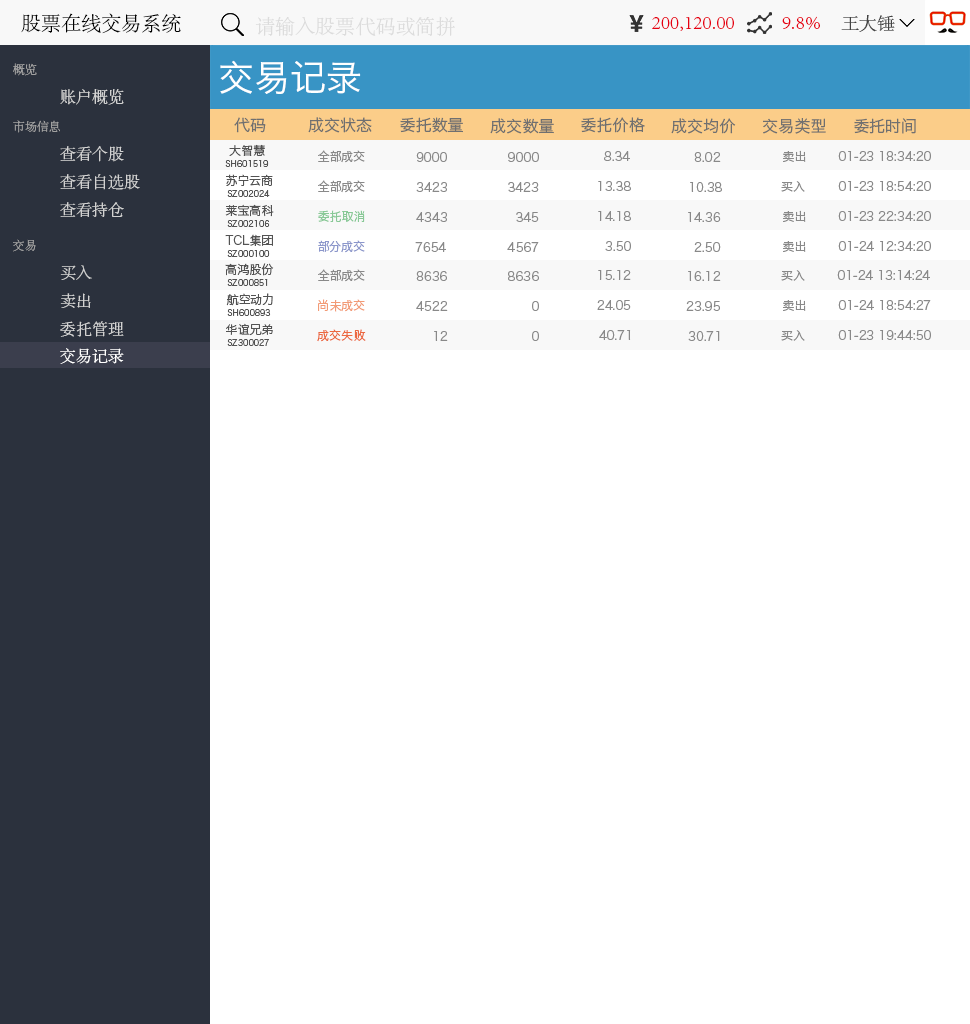
<style>
.page{position:relative;width:970px;height:1024px;background:#ffffff}
.page>*{position:absolute;margin:0}
.t1{font:20px "AdobeSongStd-Light";color:#000000}
.t2{font:20px "AdobeSongStd-Light";color:#dcdcdc}
.t3{font:20px "AdobeSongStd-Light";color:#e60012}
.t4{font:18px "AdobeSongStd-Light";color:#434343}
.t5{font:12px "AdobeSongStd-Light";color:#a0a0a0}
.t6{font:36px "HiraginoSansGB-W3";color:#ffffff}
.t7{font:16px "AdobeSongStd-Light";color:#d2d2d2}
.t8{font:16px "HiraginoSansGB-W3";color:#707070}
.t9{font:12px "HiraginoSansGB-W3";color:#535353}
.t10{font:12px "HiraginoSansGB-W3";color:#898989}
.t11{font:8px "HiraginoSansGB-W3";color:#535353}
.t12{font:12px "HiraginoSansGB-W3";color:#89c997}
.t13{font:12px "HiraginoSansGB-W3";color:#8c97cb}
.t14{font:12px "HiraginoSansGB-W3";color:#f29b76}
.t15{font:12px "HiraginoSansGB-W3";color:#ec6941}
.t16{font:16px "AdobeSongStd-Light";color:#ffffff}
</style>
<div class="page">
<p class="t1" style="left:21px;top:13px;width:160px;height:21px">股票在线交易系统</p>
<p class="t2" style="left:255px;top:16px;width:200px;height:21px">请输入股票代码或简拼</p>
<p class="t3" style="left:652px;top:17px;width:82px;height:14px">200,120.00</p>
<p class="t3" style="left:782px;top:16px;width:38px;height:14px">9.8%</p>
<p class="t4" style="left:841px;top:15px;width:54px;height:17px">王大锤</p>
<p class="t5" style="left:13px;top:63px;width:24px;height:13px">概览</p>
<p class="t6" style="left:220px;top:60px;width:141px;height:34px">交易记录</p>
<p class="t7" style="left:60px;top:89px;width:64px;height:16px">账户概览</p>
<p class="t5" style="left:13px;top:120px;width:47px;height:13px">市场信息</p>
<p class="t8" style="left:234px;top:117px;width:32px;height:16px">代码</p>
<p class="t8" style="left:308px;top:117px;width:64px;height:16px">成交状态</p>
<p class="t8" style="left:400px;top:117px;width:63px;height:16px">委托数量</p>
<p class="t8" style="left:490px;top:118px;width:64px;height:16px">成交数量</p>
<p class="t8" style="left:581px;top:117px;width:64px;height:16px">委托价格</p>
<p class="t8" style="left:671px;top:118px;width:65px;height:16px">成交均价</p>
<p class="t8" style="left:763px;top:118px;width:63px;height:16px">交易类型</p>
<p class="t8" style="left:854px;top:118px;width:62px;height:16px">委托时间</p>
<p class="t7" style="left:60px;top:146px;width:64px;height:16px">查看个股</p>
<p class="t9" style="left:229px;top:144px;width:36px;height:12px">大智慧</p>
<p class="t10" style="left:318px;top:150px;width:47px;height:13px">全部成交</p>
<p class="t10" style="left:783px;top:150px;width:23px;height:12px">卖出</p>
<p class="t11" style="left:225px;top:160px;width:44px;height:7px">SH601519</p>
<p class="t10" style="left:416px;top:152px;width:31px;height:10px">9000</p>
<p class="t10" style="left:508px;top:152px;width:31px;height:10px">9000</p>
<p class="t10" style="left:604px;top:151px;width:26px;height:10px">8.34</p>
<p class="t10" style="left:694px;top:152px;width:27px;height:10px">8.02</p>
<p class="t10" style="left:838px;top:151px;width:93px;height:10px">01-23 18:34:20</p>
<p class="t7" style="left:60px;top:174px;width:80px;height:16px">查看自选股</p>
<p class="t9" style="left:226px;top:174px;width:47px;height:12px">苏宁云商</p>
<p class="t10" style="left:318px;top:180px;width:47px;height:13px">全部成交</p>
<p class="t10" style="left:416px;top:182px;width:31px;height:10px">3423</p>
<p class="t10" style="left:508px;top:182px;width:31px;height:10px">3423</p>
<p class="t10" style="left:598px;top:181px;width:33px;height:10px">13.38</p>
<p class="t10" style="left:690px;top:182px;width:32px;height:10px">10.38</p>
<p class="t10" style="left:781px;top:181px;width:24px;height:11px">买入</p>
<p class="t10" style="left:838px;top:181px;width:93px;height:10px">01-23 18:54:20</p>
<p class="t11" style="left:227px;top:190px;width:43px;height:7px">SZ002024</p>
<p class="t7" style="left:60px;top:202px;width:64px;height:15px">查看持仓</p>
<p class="t9" style="left:225px;top:204px;width:49px;height:13px">莱宝高科</p>
<p class="t11" style="left:227px;top:220px;width:43px;height:7px">SZ002106</p>
<p class="t12" style="left:318px;top:210px;width:47px;height:12px">委托取消</p>
<p class="t10" style="left:416px;top:212px;width:31px;height:10px">4343</p>
<p class="t10" style="left:516px;top:212px;width:23px;height:10px">345</p>
<p class="t10" style="left:598px;top:211px;width:33px;height:10px">14.18</p>
<p class="t10" style="left:688px;top:212px;width:33px;height:10px">14.36</p>
<p class="t10" style="left:783px;top:210px;width:23px;height:12px">卖出</p>
<p class="t10" style="left:838px;top:211px;width:93px;height:10px">01-23 22:34:20</p>
<p class="t5" style="left:13px;top:239px;width:23px;height:13px">交易</p>
<p class="t9" style="left:225px;top:234px;width:48px;height:12px">TCL集团</p>
<p class="t13" style="left:318px;top:240px;width:47px;height:13px">部分成交</p>
<p class="t10" style="left:415px;top:242px;width:31px;height:10px">7654</p>
<p class="t10" style="left:507px;top:242px;width:32px;height:10px">4567</p>
<p class="t10" style="left:605px;top:241px;width:26px;height:10px">3.50</p>
<p class="t10" style="left:694px;top:242px;width:27px;height:10px">2.50</p>
<p class="t10" style="left:783px;top:240px;width:23px;height:12px">卖出</p>
<p class="t10" style="left:838px;top:241px;width:93px;height:10px">01-24 12:34:20</p>
<p class="t11" style="left:227px;top:250px;width:43px;height:7px">SZ000100</p>
<p class="t7" style="left:60px;top:265px;width:32px;height:15px">买入</p>
<p class="t9" style="left:225px;top:263px;width:49px;height:13px">高鸿股份</p>
<p class="t10" style="left:318px;top:269px;width:47px;height:13px">全部成交</p>
<p class="t10" style="left:598px;top:270px;width:33px;height:10px">15.12</p>
<p class="t10" style="left:781px;top:270px;width:24px;height:11px">买入</p>
<p class="t10" style="left:837px;top:270px;width:93px;height:10px">01-24 13:14:24</p>
<p class="t11" style="left:227px;top:279px;width:41px;height:7px">SZ000851</p>
<p class="t10" style="left:416px;top:271px;width:31px;height:10px">8636</p>
<p class="t10" style="left:508px;top:271px;width:31px;height:10px">8636</p>
<p class="t10" style="left:688px;top:271px;width:33px;height:10px">16.12</p>
<p class="t7" style="left:60px;top:293px;width:31px;height:15px">卖出</p>
<p class="t9" style="left:226px;top:293px;width:47px;height:13px">航空动力</p>
<p class="t14" style="left:318px;top:299px;width:47px;height:13px">尚未成交</p>
<p class="t10" style="left:416px;top:301px;width:32px;height:10px">4522</p>
<p class="t10" style="left:532px;top:301px;width:7px;height:10px">0</p>
<p class="t10" style="left:597px;top:300px;width:34px;height:10px">24.05</p>
<p class="t10" style="left:686px;top:301px;width:34px;height:10px">23.95</p>
<p class="t10" style="left:783px;top:299px;width:23px;height:12px">卖出</p>
<p class="t10" style="left:838px;top:300px;width:93px;height:10px">01-24 18:54:27</p>
<p class="t11" style="left:227px;top:309px;width:44px;height:7px">SH600893</p>
<p class="t7" style="left:60px;top:321px;width:64px;height:16px">委托管理</p>
<p class="t9" style="left:226px;top:323px;width:47px;height:13px">华谊兄弟</p>
<p class="t15" style="left:317px;top:329px;width:49px;height:13px">成交失败</p>
<p class="t11" style="left:227px;top:339px;width:42px;height:7px">SZ300027</p>
<p class="t10" style="left:434px;top:331px;width:14px;height:10px">12</p>
<p class="t10" style="left:532px;top:331px;width:7px;height:10px">0</p>
<p class="t10" style="left:599px;top:330px;width:32px;height:10px">40.71</p>
<p class="t10" style="left:688px;top:331px;width:32px;height:10px">30.71</p>
<p class="t10" style="left:781px;top:330px;width:24px;height:11px">买入</p>
<p class="t10" style="left:838px;top:330px;width:93px;height:10px">01-23 19:44:50</p>
<p class="t16" style="left:60px;top:348px;width:64px;height:16px">交易记录</p>
</div>
